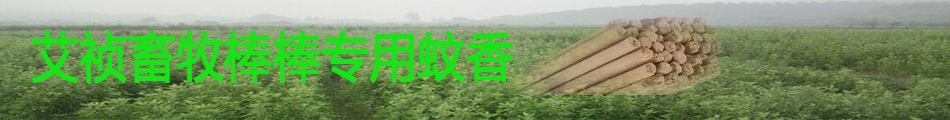
<style>
.page{position:relative;width:950px;height:120px}
.page>*{position:absolute;margin:0}
.t1{font:53.1px "MicrosoftYaHei";color:#17e317;font-weight:bold;scale:0.89 1}
</style>
<div class="page">
<p class="t1" style="left:31px;top:31px;width:483px;height:52px">艾祯畜牧棒棒专用蚊香</p>
</div>
